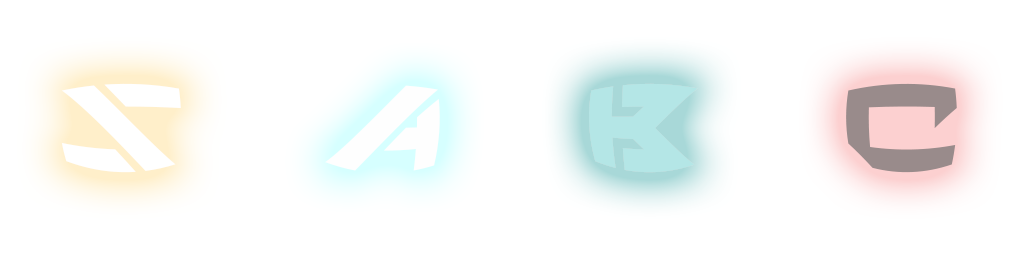
<style>
.page{position:relative;width:1024px;height:256px;background:#ffffff}
.page>*{position:absolute;margin:0}
.t1{font:141.1px "TechnoHideo";color:#ffffff}
.t2{font:141.1px "TechnoHideo";color:#fefefe}
.t3{font:141.1px "TechnoHideo";color:#b4e6e6}
.t4{font:141.1px "TechnoHideo";color:#998b8b}
</style>
<div class="page">
<p class="t1" style="left:61px;top:83px;width:120px;height:90px">S</p>
<p class="t2" style="left:325px;top:85px;width:115px;height:86px">A</p>
<p class="t3" style="left:589px;top:83px;width:109px;height:90px">B</p>
<p class="t4" style="left:846px;top:83px;width:111px;height:90px">C</p>
</div>
